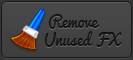
<style>
.page{position:relative;width:133px;height:60px}
.page>*{position:absolute;margin:0}
.t1{font:16px/18px "Pacifico";color:#1a1a1a}
</style>
<div class="page">
<p class="t1" style="left:44px;top:14px;width:78px;height:33px">Remove<br>Unused FX</p>
</div>
